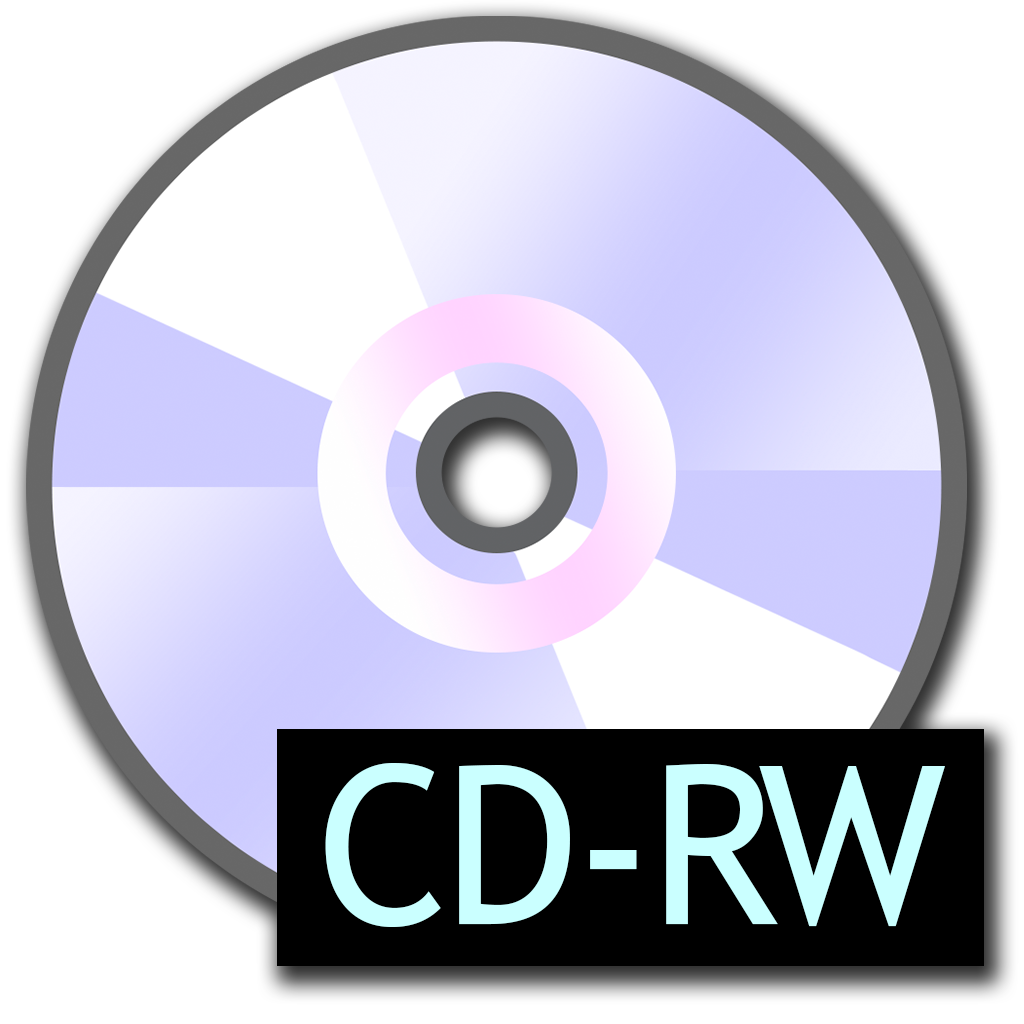
<style>
.page{position:relative;width:1024px;height:1024px;background:#ffffff}
.page>*{position:absolute;margin:0}
.t1{font:220.9px "TrebuchetMS";letter-spacing:-0.025em;color:#caffff}
</style>
<div class="page">
<p class="t1" style="left:325px;top:763px;width:620px;height:164px">CD-RW</p>
</div>
